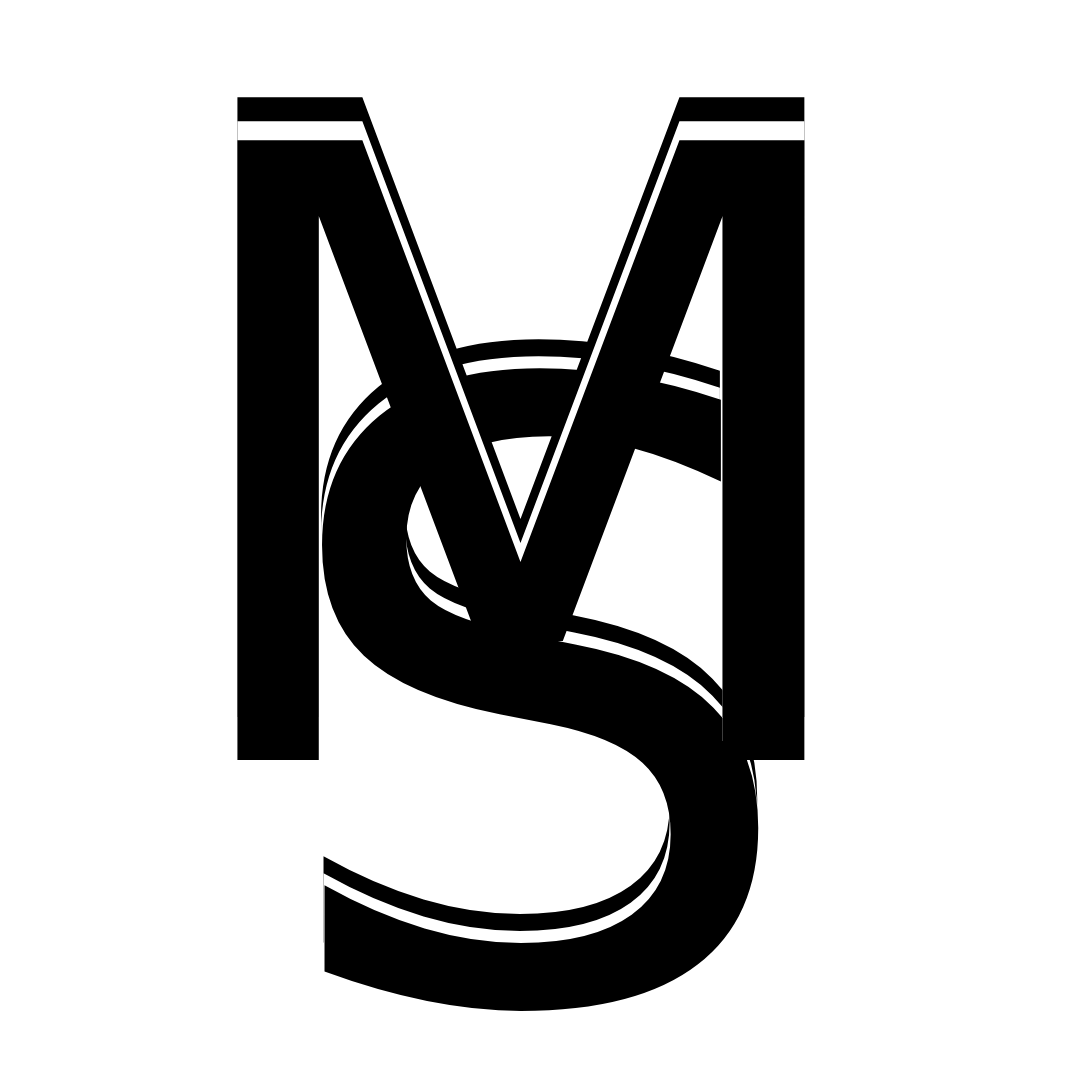
<style>
.page{position:relative;width:1080px;height:1080px;background:#ffffff}
.page>*{position:absolute;margin:0}
.t1{font:850px "DejaVuSans";color:#000000}
</style>
<div class="page">
<p class="t1" style="left:237px;top:97px;width:568px;height:620px">M</p>
<p class="t1" style="left:237px;top:121px;width:568px;height:620px">M</p>
<p class="t1" style="left:237px;top:140px;width:568px;height:620px">M</p>
<p class="t1" style="left:321px;top:339px;width:437px;height:644px">S</p>
<p class="t1" style="left:321px;top:356px;width:437px;height:644px">S</p>
<p class="t1" style="left:322px;top:368px;width:437px;height:644px">S</p>
</div>
